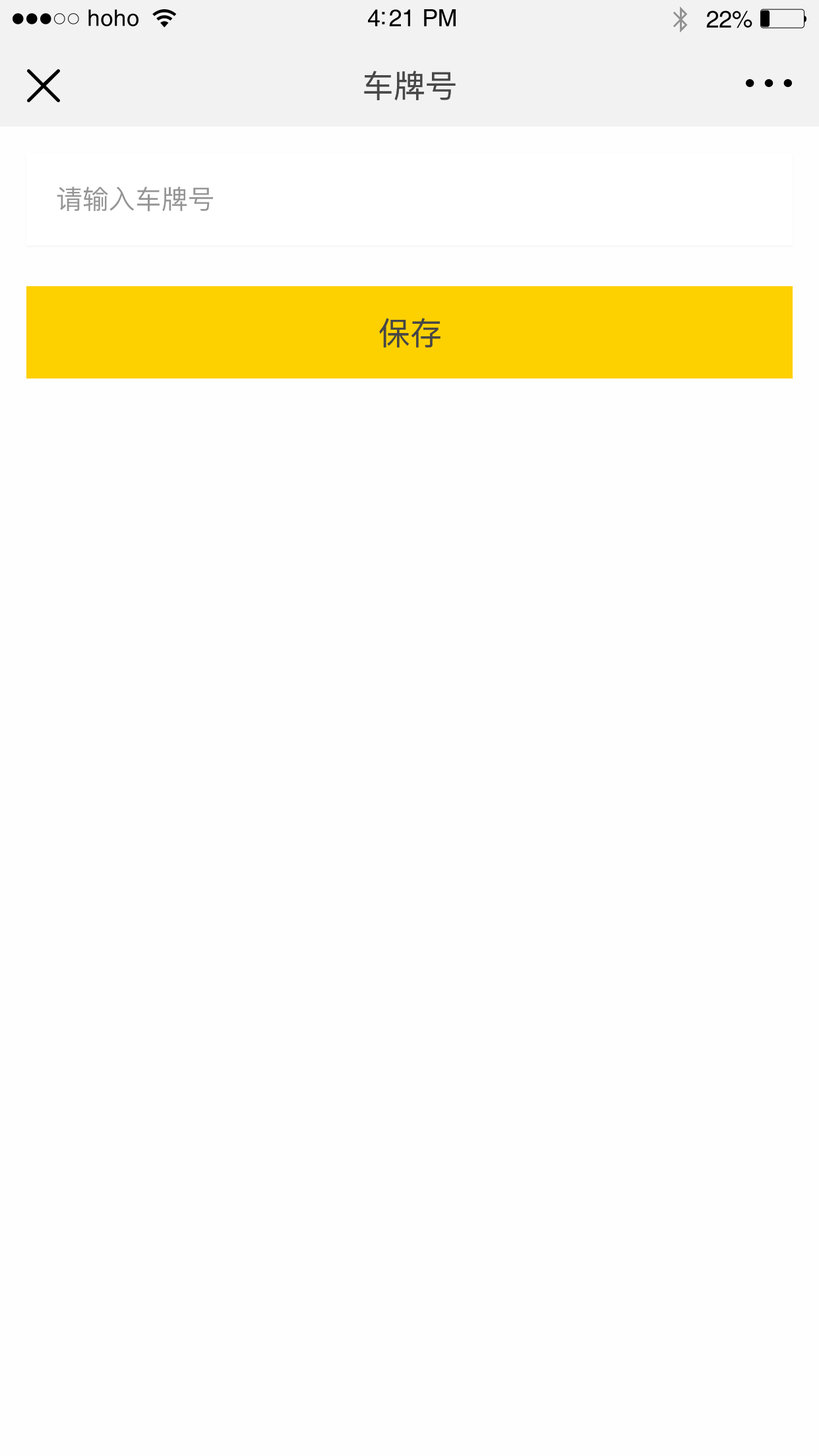
<style>
.page{position:relative;width:819px;height:1456px;background:#fffeff}
.page>*{position:absolute;margin:0}
.t1{font:22.8px "Helvetica";letter-spacing:0.02em;color:#000000}
.t2{font:23.8px "Helvetica";letter-spacing:-0.02em;color:#000000}
.t3{font:31.7px "PingFang-SC-Medium";color:#474747}
.t4{font:26.4px "PingFang-SC-Medium";color:#959595}
</style>
<div class="page">
<p class="t1" style="left:88px;top:9px;width:50px;height:17px">hoho</p>
<p class="t2" style="left:368px;top:9px;width:88px;height:17px">4:21 PM</p>
<p class="t2" style="left:706px;top:11px;width:46px;height:17px">22%</p>
<p class="t3" style="left:364px;top:71px;width:92px;height:30px">车牌号</p>
<p class="t4" style="left:57px;top:187px;width:156px;height:25px">请输入车牌号</p>
<p class="t3" style="left:379px;top:318px;width:61px;height:30px">保存</p>
</div>
